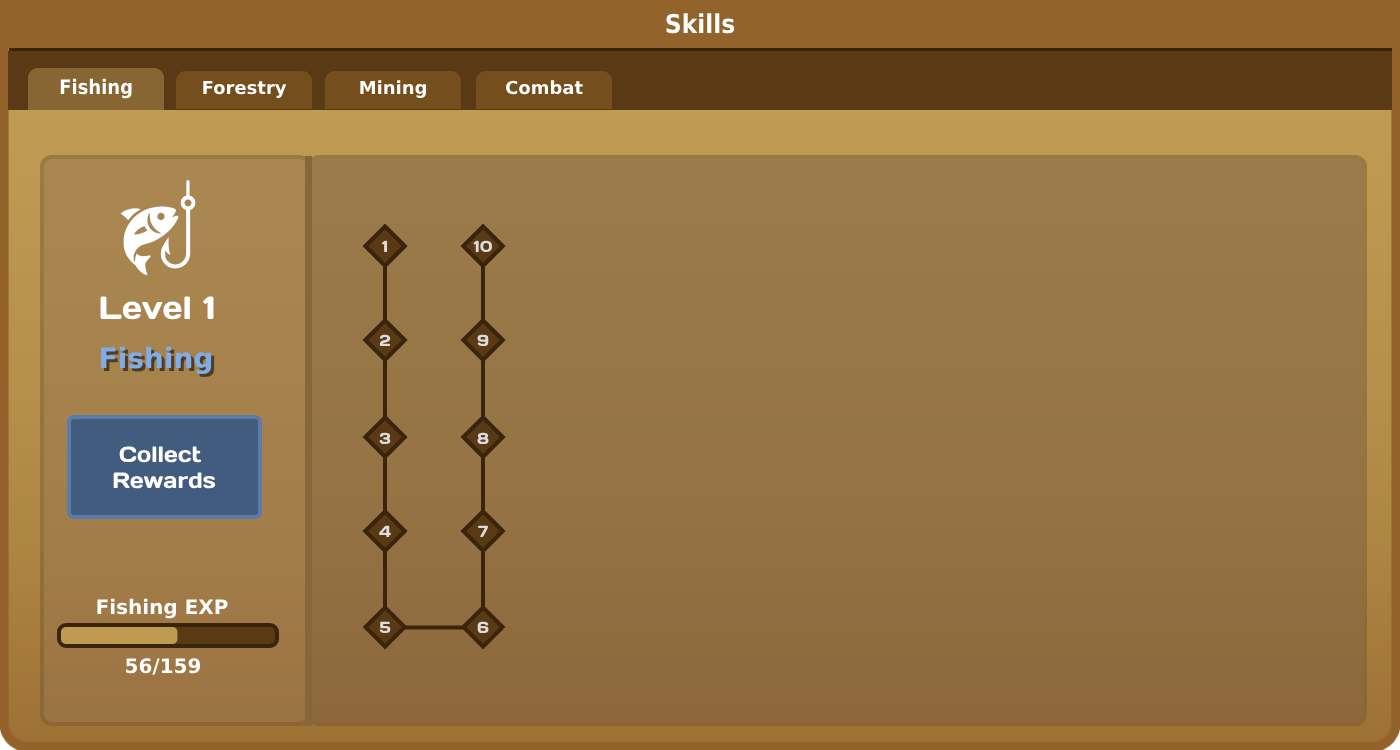
<style>
.page{position:relative;width:1400px;height:750px}
.page>*{position:absolute;margin:0}
.t1{font:26px "DejaVuSansCondensed-Bold";color:#ffffff}
.t2{font:20px "DejaVuSansCondensed-Bold";color:#ffffff}
.t3{font:18px "DejaVuSansCondensed-Bold";color:#ffffff;scale:1.11 1}
.t4{font:18px "DejaVuSansCondensed-Bold";color:#593a14;scale:1.11 1}
.t5{font:16px "DaysOne-Regular";color:#dcdcdc}
.t6{font:16px "DaysOne-Regular"}
.t7{font:32px "DaysOne-Regular";color:#ffffff}
.t8{font:28px "DejaVuSans-Bold";color:#7facea}
.t9{font:22px "DaysOne-Regular";color:#ffffff}
.t10{font:20px "DejaVuSans-Bold";color:#ffffff}
</style>
<div class="page">
<p class="t1" style="left:666px;top:13px;width:69px;height:21px">Skills</p>
<p class="t2" style="left:60px;top:78px;width:72px;height:21px">Fishing</p>
<p class="t3" style="left:203px;top:81px;width:84px;height:17px">Forestry</p>
<p class="t3" style="left:360px;top:80px;width:66px;height:18px">Mining</p>
<p class="t3" style="left:506px;top:80px;width:77px;height:15px"><span class="t4">C</span>ombat</p>
<p class="t5" style="left:381px;top:240px;width:7px;height:12px">1</p>
<p class="t5" style="left:381px;top:240px;width:7px;height:12px">1</p>
<p class="t5" style="left:473px;top:240px;width:20px;height:13px">10</p>
<p class="t6" style="left:479px;top:240px;width:7px;height:12px">1</p>
<p class="t7" style="left:100px;top:296px;width:114px;height:24px">Level 1</p>
<p class="t5" style="left:379px;top:334px;width:12px;height:12px">2</p>
<p class="t5" style="left:379px;top:334px;width:12px;height:12px">2</p>
<p class="t5" style="left:477px;top:334px;width:12px;height:12px">2</p>
<p class="t5" style="left:477px;top:334px;width:12px;height:13px">9</p>
<p class="t8" style="left:101px;top:346px;width:111px;height:29px">Fishing</p>
<p class="t5" style="left:379px;top:432px;width:12px;height:13px">3</p>
<p class="t5" style="left:379px;top:432px;width:12px;height:13px">3</p>
<p class="t5" style="left:477px;top:432px;width:12px;height:13px">3</p>
<p class="t5" style="left:477px;top:432px;width:12px;height:13px">8</p>
<p class="t9" style="left:113px;top:446px;width:103px;height:43px;text-align:center">Collect <br>Rewards</p>
<p class="t5" style="left:379px;top:525px;width:12px;height:12px">4</p>
<p class="t5" style="left:379px;top:525px;width:12px;height:12px">4</p>
<p class="t5" style="left:478px;top:525px;width:10px;height:12px">7</p>
<p class="t10" style="left:97px;top:598px;width:131px;height:21px">Fishing EXP</p>
<p class="t5" style="left:379px;top:621px;width:12px;height:13px">5</p>
<p class="t5" style="left:477px;top:621px;width:12px;height:13px">6</p>
<p class="t10" style="left:126px;top:658px;width:75px;height:17px">56/159</p>
</div>
